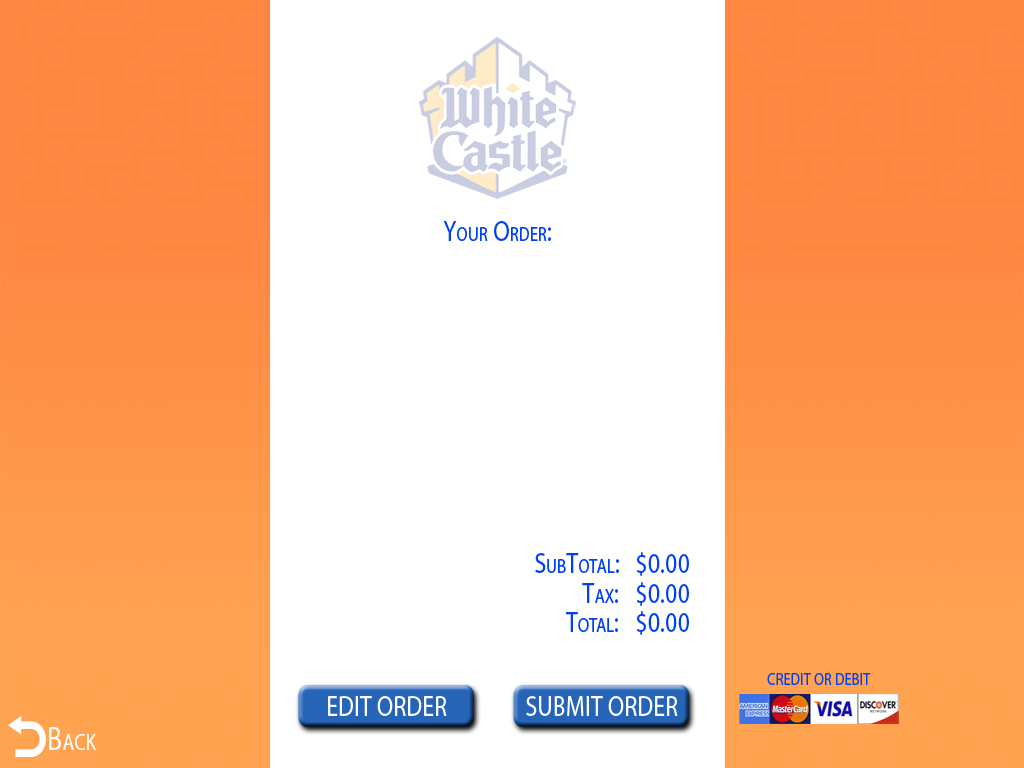
<style>
.page{position:relative;width:1024px;height:768px;background:#ffffff}
.page>*{position:absolute;margin:0}
.t1{font:28.6px "MyriadPro-Regular";letter-spacing:0.01em;color:#003ff3;font-variant:small-caps;scale:0.82 1}
.t2{font:17.3px "MyriadPro-Regular";letter-spacing:0.01em;color:#003ff3;font-variant:small-caps;scale:0.82 1}
.t3{font:28.6px "MyriadPro-Regular";letter-spacing:0.01em;color:#ffffff;font-variant:small-caps;scale:0.82 1}
.t4{font:33.3px "MyriadPro-Regular";letter-spacing:0.01em;color:#ffffff;font-variant:small-caps;scale:0.82 1}
</style>
<div class="page">
<p class="t1" style="left:443px;top:221px;width:108px;height:20px">Your Order:</p>
<p class="t1" style="left:535px;top:553px;width:84px;height:20px">SubTotal:</p>
<p class="t1" style="left:637px;top:552px;width:52px;height:24px">$0.00</p>
<p class="t1" style="left:637px;top:582px;width:52px;height:24px">$0.00</p>
<p class="t1" style="left:582px;top:583px;width:36px;height:20px">Tax:</p>
<p class="t1" style="left:565px;top:612px;width:53px;height:20px">Total:</p>
<p class="t1" style="left:637px;top:611px;width:52px;height:24px">$0.00</p>
<p class="t2" style="left:767px;top:673px;width:104px;height:12px">CREDIT OR DEBIT</p>
<p class="t3" style="left:328px;top:696px;width:119px;height:20px">EDIT ORDER</p>
<p class="t3" style="left:526px;top:696px;width:152px;height:20px">SUBMIT ORDER</p>
<p class="t4" style="left:49px;top:727px;width:48px;height:23px">Back</p>
</div>
